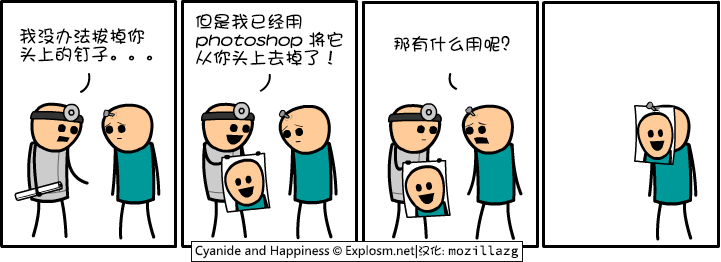
<style>
.page{position:relative;width:721px;height:262px;background:#ffffff}
.page>*{position:absolute;margin:0}
.t1{font:18px/18px "DFPShaoNvW5";color:#000000}
.t2{font:18px/18px "DFPShaoNvW5";color:#000000;font-style:italic}
.t3{font:18px "DFPShaoNvW5";color:#000000}
</style>
<div class="page">
<p class="t1" style="left:196px;top:13px;width:147px;height:53px">但是我已经用<br><span class="t2">photoshop </span>将它<br>从你头上去掉了！</p>
<p class="t1" style="left:19px;top:28px;width:134px;height:34px">我没办法拔掉你<br>头上的钉子。。。</p>
<p class="t3" style="left:394px;top:36px;width:116px;height:16px">那有什么用呢？</p>
</div>
